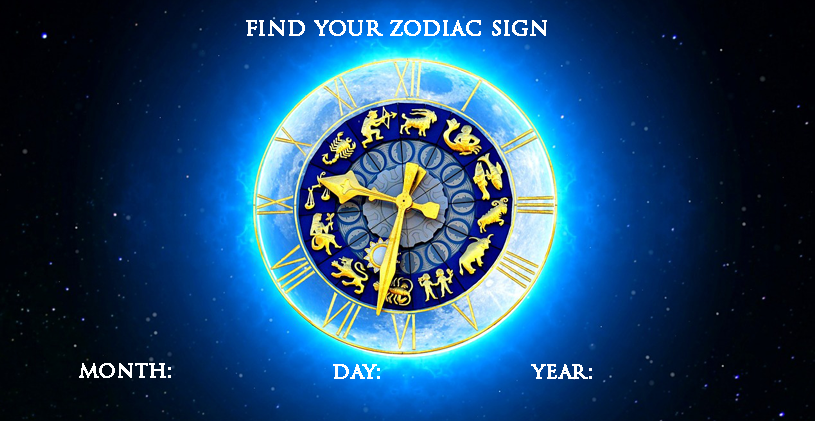
<style>
.page{position:relative;width:815px;height:421px}
.page>*{position:absolute;margin:0}
.t1{font:22.6px "TrajanPro3-Regular";color:#ffffff;font-weight:bold}
.t2{font:21px "TrajanPro3-Regular";color:#ffffff;font-weight:bold}
</style>
<div class="page">
<p class="t1" style="left:246px;top:20px;width:301px;height:16px">find your zodiac sign</p>
<p class="t2" style="left:79px;top:363px;width:92px;height:15px">month:</p>
<p class="t2" style="left:333px;top:364px;width:47px;height:15px">day:</p>
<p class="t2" style="left:531px;top:364px;width:61px;height:15px">year:</p>
</div>
